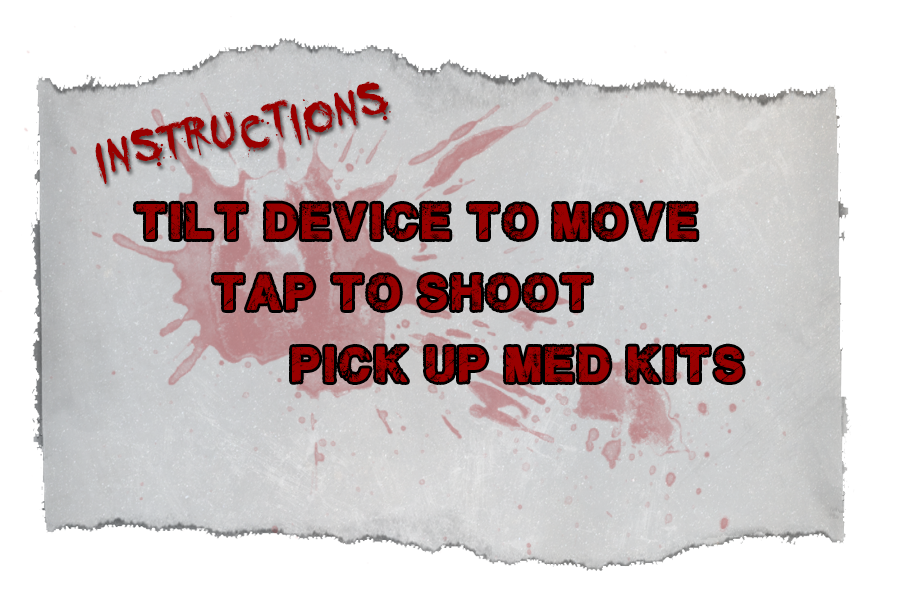
<style>
.page{position:relative;width:906px;height:589px;background:#ffffff}
.page>*{position:absolute;margin:0}
.t1{font:76.4px "YouMurdererBB";letter-spacing:0.025em;color:#990000}
.t2{font:40.1px "PlaneCrash";letter-spacing:0.05em;color:#990000}
</style>
<div class="page">
<p class="t1" style="left:95px;top:81px;width:296px;height:103px;rotate:-11deg">instructions</p>
<p class="t2" style="left:136px;top:203px;width:561px;height:36px">tilt device to move</p>
<p class="t2" style="left:214px;top:274px;width:377px;height:36px">tap to shoot</p>
<p class="t2" style="left:292px;top:346px;width:451px;height:36px">pick up med kits</p>
</div>
